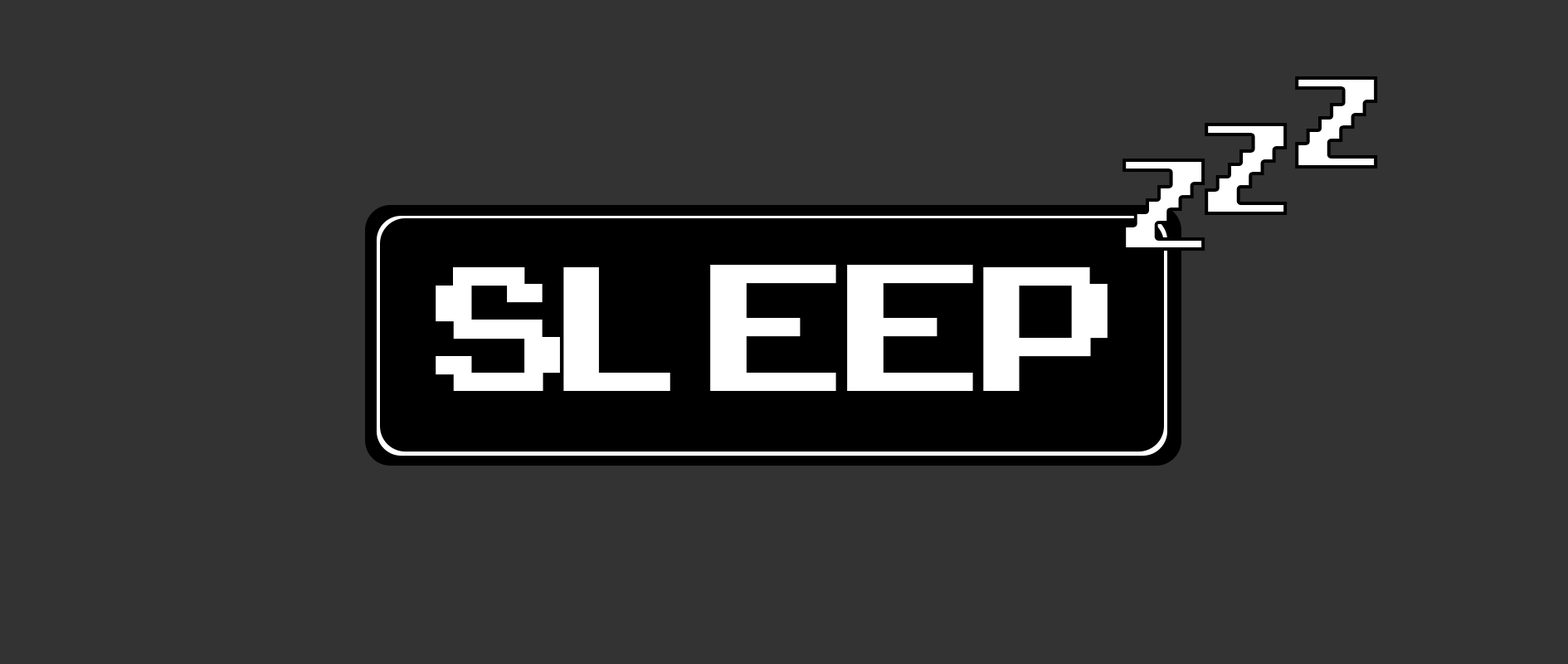
<style>
.page{position:relative;width:1568px;height:664px;background:#333333}
.page>*{position:absolute;margin:0}
.t1{font:186.4px "ArcadeClassic";color:#ffffff;scale:0.88 1}
.t2{font:248.9px "ArcadeClassic";color:#ffffff}
</style>
<div class="page">
<p class="t1" style="left:1295px;top:76px;width:83px;height:92px">Z</p>
<p class="t1" style="left:1205px;top:123px;width:83px;height:92px">Z</p>
<p class="t1" style="left:1122px;top:158px;width:83px;height:93px">Z</p>
<p class="t2" style="left:436px;top:265px;width:672px;height:126px">SLEEP</p>
</div>
